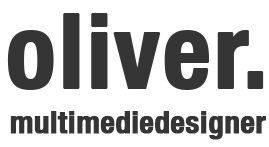
<style>
.page{position:relative;width:269px;height:147px;background:#ffffff}
.page>*{position:absolute;margin:0}
.t1{font:103.4px "HelveticaNeue-CondensedBold";color:#353535;font-weight:bold}
.t2{font:30.6px "HelveticaNeue-CondensedBold";color:#353535;font-weight:bold}
</style>
<div class="page">
<p class="t1" style="left:7px;top:13px;width:257px;height:77px">oliver.</p>
<p class="t2" style="left:10px;top:111px;width:256px;height:29px">multimediedesigner</p>
</div>
